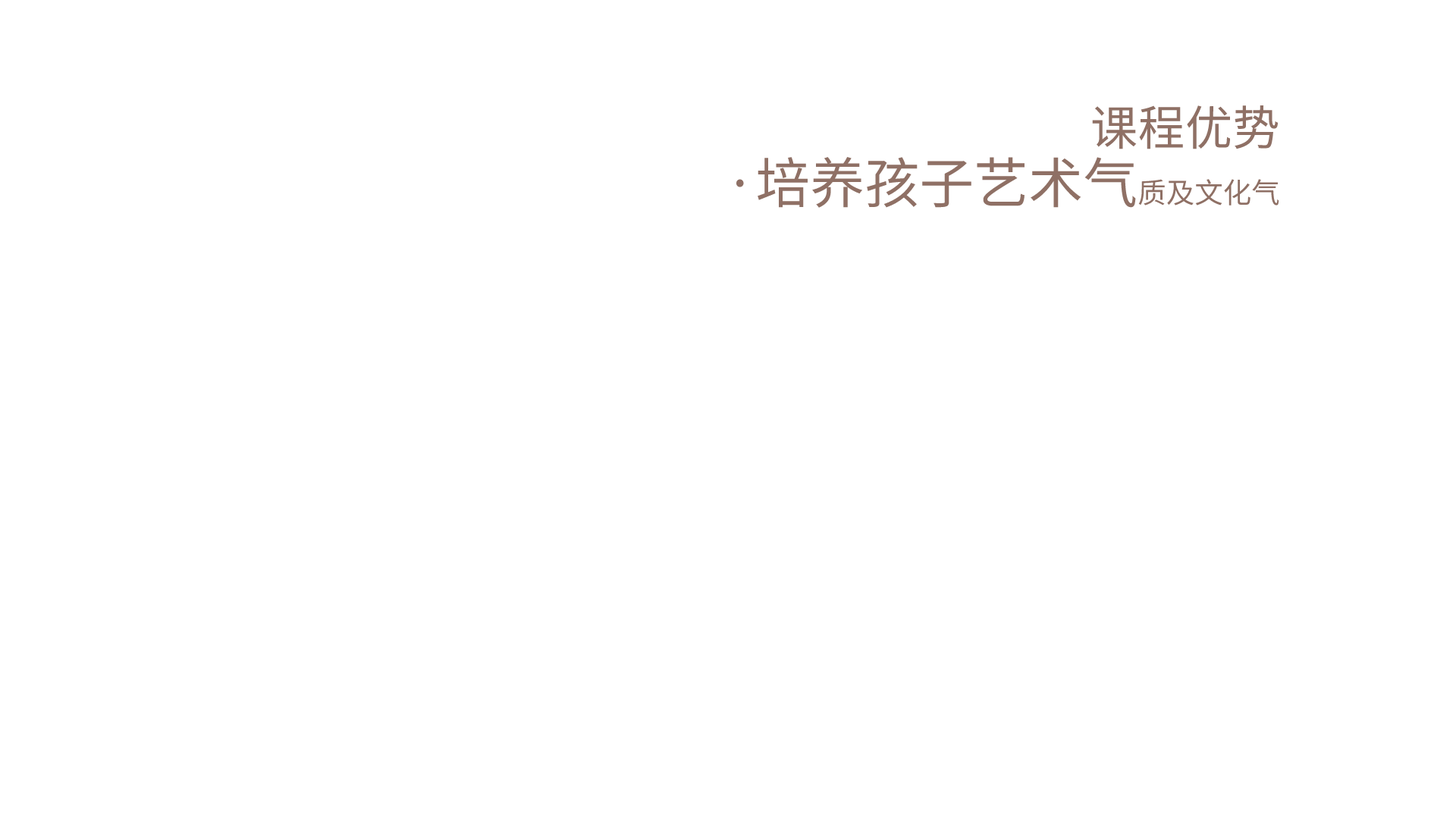
<style>
.page{position:relative;width:1456px;height:819px;background:#ffffff}
.page>*{position:absolute;margin:0}
.t1{font:54.6px/57.9px "AdobeHeitiStd-Regular";letter-spacing:0.12em;color:#8f7065}
.t2{font:47.4px/122.7px "AdobeHeitiStd-Regular";letter-spacing:0.12em;color:#8f7065}
.t3{font:28.4px/57.9px "AdobeHeitiStd-Regular";letter-spacing:0.12em;color:#8f7065}
</style>
<div class="page">
<p class="t1" style="left:736px;top:105px;width:543px;height:103px;text-align:right"><span class="t2">课程优势<br></span>·培养孩子艺术气<span class="t3">质及文化气</span></p>
</div>
